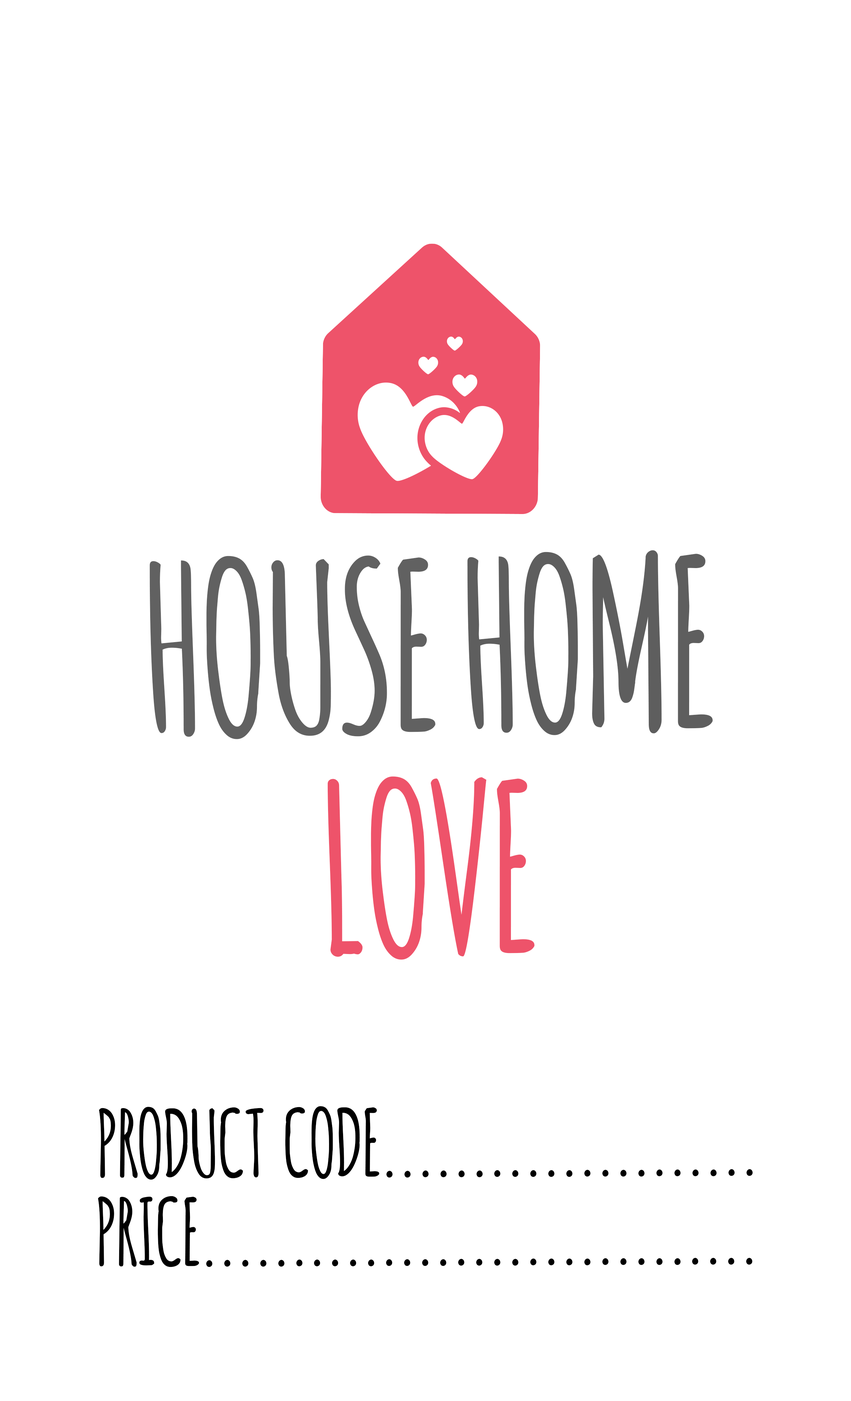
<style>
.page{position:relative;width:851px;height:1401px;background:#ffffff}
.page>*{position:absolute;margin:0}
.t1{font:91.4px/222.7px "Amatic-Bold";color:#616161;scale:0.91 1}
.t2{font:91.4px/222.7px "Amatic-Bold";color:#5e5e5e;scale:0.91 1}
.t3{font:91.4px/222.7px "Amatic-Bold";color:#ee536a;scale:0.91 1}
.t4{font:36.3px/88.6px "Amatic-Bold";color:#000000;scale:0.91 1}
</style>
<div class="page">
<p class="t1" style="left:149px;top:550px;width:564px;height:410px;text-align:center;rotate:-1deg">HOUSE <span class="t2">HOME<br></span><span class="t3">LOVE</span></p>
<p class="t4" style="left:98px;top:1106px;width:655px;height:162px;text-align:center">PRODUCT  CODE.....................<br>PRICE...............................</p>
</div>
